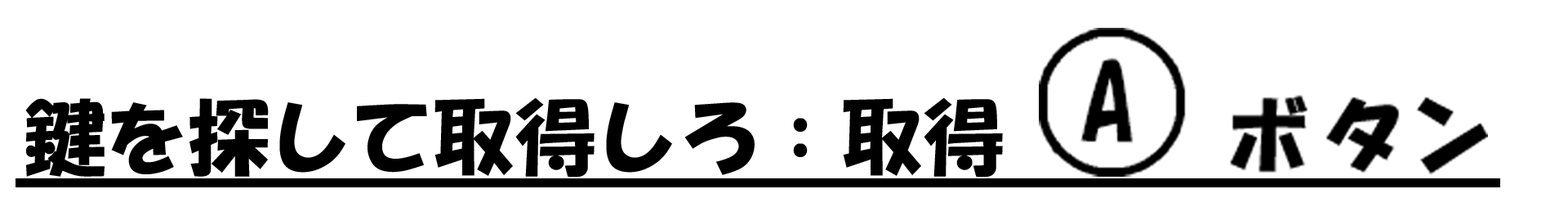
<style>
.page{position:relative;width:1568px;height:216px;background:#ffffff}
.page>*{position:absolute;margin:0}
.t1{font:81.7px "HGSoeiKakupoptai";color:#000000}
</style>
<div class="page">
<p class="t1" style="left:25px;top:97px;width:978px;height:80px">鍵を探して取得しろ：取得</p>
</div>
